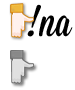
<style>
.page{position:relative;width:75px;height:90px;background:#ffffff}
.page>*{position:absolute;margin:0}
.t1{font:40.3px "Mission-Script";color:#000000}
</style>
<div class="page">
<p class="t1" style="left:27px;top:4px;width:46px;height:33px">!na</p>
</div>
